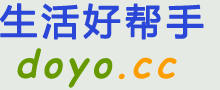
<style>
.page{position:relative;width:220px;height:90px;background:#e5eae4}
.page>*{position:absolute;margin:0}
.t1{font:36px "MicrosoftYaHei";letter-spacing:0.1em;color:#2b47d7;font-weight:bold}
.t2{font:36px "ComicSansMS";letter-spacing:0.1em;color:#669a00;font-weight:bold;font-style:italic;scale:1.06 1}
.t3{font:36px "ComicSansMS";letter-spacing:0.1em;color:#ff9e00;font-weight:bold;font-style:italic;scale:1.06 1}
</style>
<div class="page">
<p class="t1" style="left:0px;top:3px;width:204px;height:37px">生活好帮手</p>
<p class="t2" style="left:17px;top:48px;width:160px;height:40px">doyo<span class="t3">.cc</span></p>
</div>
